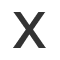
<style>
.page{position:relative;width:60px;height:60px;background:#ffffff}
.page>*{position:absolute;margin:0}
.t1{font:64.3px "wamakeprice-regular";color:#333333}
</style>
<div class="page">
<p class="t1" style="left:13px;top:12px;width:33px;height:36px">x</p>
</div>
